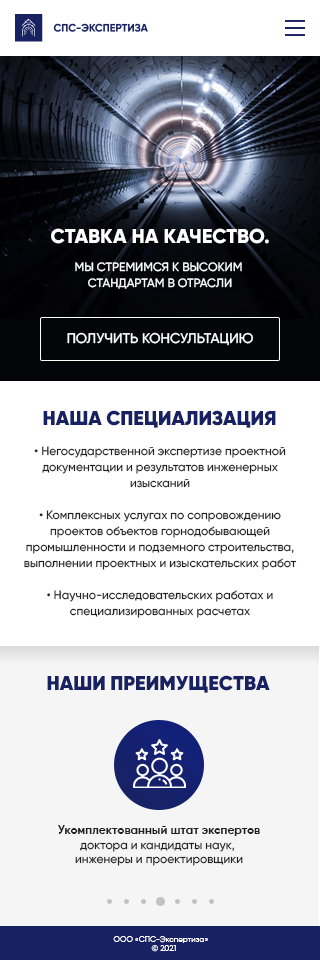
<style>
.page{position:relative;width:320px;height:960px;background:#ffffff}
.page>*{position:absolute;margin:0}
.t1{font:12px/16px "Gilroy-Medium";color:#ffffff;text-transform:uppercase}
.t2{font:20px "Gilroy-ExtraBold";color:#ffffff;text-transform:uppercase}
.t3{font:20px/36px "Gilroy-ExtraBold";color:#ffffff;text-transform:uppercase}
.t4{font:20px/28px "Gilroy-ExtraBold";color:#ffffff;text-transform:uppercase}
.t5{font:12px/28px "Gilroy-Medium";color:#ffffff;text-transform:uppercase}
.t6{font:14px "Gilroy-Medium";color:#ffffff;text-transform:uppercase}
.t7{font:20px "Gilroy-Black";color:#182263}
.t8{font:12px/16px "Gilroy-Medium";color:#212121}
.t9{font:12px "Gilroy-Medium";color:#212121}
.t10{font:12px "Gilroy-Bold";color:#212121}
.t11{font:8px "Gilroy-Regular";color:#ffffff}
</style>
<div class="page">
<p class="t1" style="left:51px;top:228px;width:218px;height:61px;text-align:center"><span class="t2">Ставка </span><span class="t3">н</span><span class="t4">а качество.<br></span><span class="t5">Мы стремимс</span>я к высоким <br>стандартам в отрасли</p>
<p class="t6" style="left:67px;top:332px;width:186px;height:14px">Получить консультацию</p>
<p class="t7" style="left:43px;top:410px;width:233px;height:18px">НАША СПЕЦИАЛИЗАЦИЯ</p>
<p class="t8" style="left:24px;top:446px;width:273px;height:172px;text-align:center">• Негосударственной экспертизе проектной документации и результатов инженерных изысканий<br><br>• Комплексных услугах по сопровождению проектов объектов горнодобывающей                   промышленности и подземного строительства, выполнении проектных и изыскательских работ<br><br>• Научно-исследовательских работах и специализированных расчетах</p>
<p class="t7" style="left:47px;top:675px;width:223px;height:18px">НАШИ ПРЕИМУЩЕСТВА</p>
<p class="t9" style="left:58px;top:825px;width:202px;height:41px;text-align:center"><span class="t10">Укомплектованный штат экспертов</span><br>доктора и кандидаты наук, <br>инженеры и проектировщики</p>
<p class="t11" style="left:113px;top:936px;width:95px;height:16px;text-align:center">ООО «СПС-Экспертиза»   <br>© 2021</p>
</div>
